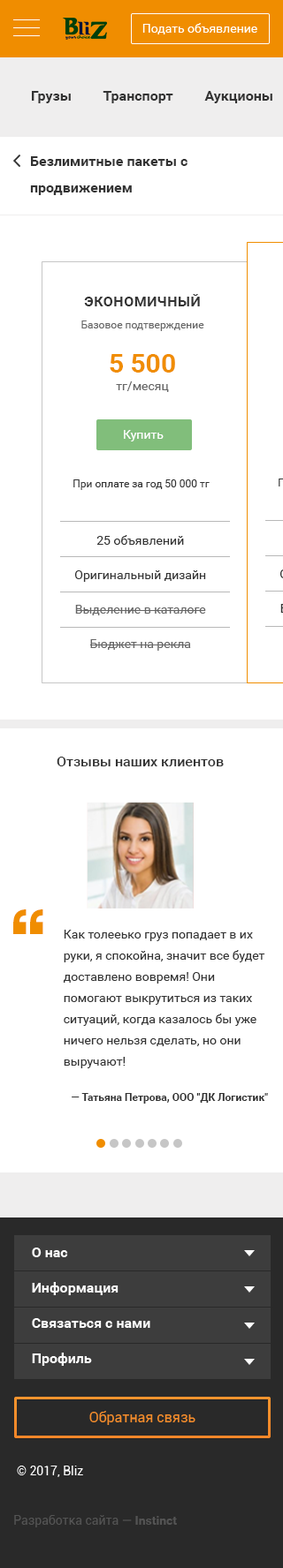
<style>
.page{position:relative;width:283px;height:1568px;background:#ffffff}
.page>*{position:absolute;margin:0}
.t1{font:14.1px/26.5px "Roboto-Bold";color:#333333}
.t2{font:10.6px/17.7px "Roboto-Regular";color:#333333}
.t3{font:14.1px/17.7px "Roboto-Bold";letter-spacing:0.03em;color:#333333;text-transform:uppercase}
.t4{font:10.6px/17.7px "Roboto-Regular";color:#666666}
.t5{font:26.5px/17.7px "Roboto-Bold";color:#f08d00}
.t6{font:12.4px/17.7px "Roboto-Regular";color:#666666}
.t7{font:12.4px "Roboto-Regular";color:#ffffff}
.t8{font:12.4px/21.2px "Roboto-Regular";color:#666666}
.t9{font:12.4px/21.2px "Roboto-Regular";color:#333333}
.t10{font:14.1px "Roboto-Medium";color:#333333}
.t11{font:70.6px "PragmaticaExtraBold";color:#f08d00}
.t12{font:10.6px "Roboto-Bold";color:#333333}
.t13{font:10.6px "Roboto-Bold";color:#303030}
</style>
<div class="page">
<p class="t1" style="left:30px;top:156px;width:157px;height:39px">Безлимитные пакеты с <br>продвижением</p>
<p class="t2" style="left:73px;top:294px;width:136px;height:196px;text-align:center"><span class="t3">Экономичный<br></span><span class="t4">Базовое подтверждение<br></span><span class="t5">5 500<br></span><span class="t6">тг/месяц<br></span><br>При оплате за год 50 000 тг</p>
<p class="t7" style="left:124px;top:430px;width:39px;height:11px">Купить</p>
<p class="t8" style="left:74px;top:535px;width:132px;height:116px;text-align:center"><span class="t9">25 объявлений<br>Оригинальный дизайн<br></span>Выделение в каталоге<br>Бюджет на рекла</p>
<p class="t10" style="left:57px;top:757px;width:166px;height:9px">Отзывы наших клиентов</p>
<p class="t11" style="left:13px;top:909px;width:30px;height:25px">“</p>
<p class="t9" style="left:63px;top:930px;width:202px;height:138px">Как толееько груз попадает в их руки, я спокойна, значит все будет   доставлено вовремя! Они помогают выкрутиться из таких ситуаций, когда казалось бы уже ничего нельзя сделать, но они выручают!</p>
<p class="t12" style="left:72px;top:1093px;width:196px;height:11px">— Татьяна Петрова, <span class="t13">ООО "ДК Логистик"</span></p>
</div>
